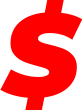
<style>
.page{position:relative;width:83px;height:110px;background:#ff0000}
.page>*{position:absolute;margin:0}
.t1{font:27.9px/64.5px "Montserrat-BlackItalic";color:#ff0000}
</style>
<div class="page">
<p class="t1" style="left:0px;top:0px;width:83px;height:110px;text-align:center">$</p>
</div>
